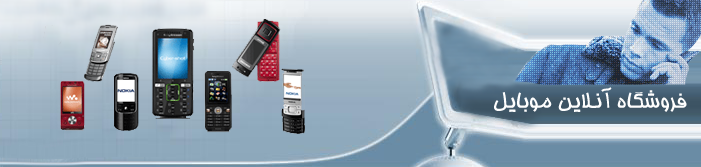
<style>
.page{position:relative;width:701px;height:167px}
.page>*{position:absolute;margin:0}
.t1{font:24px "ArialMT";color:#fefefe}
</style>
<div class="page">
<p class="t1" style="left:494px;top:87px;width:193px;height:25px">®ÄIM¼¶ ¸Ä°@ºA ½I«{»oÎ</p>
</div>
